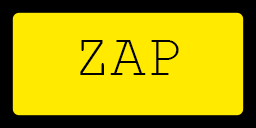
<style>
.page{position:relative;width:256px;height:128px;background:#ffea00}
.page>*{position:absolute;margin:0}
.t1{font:60px "CourierNewPSMT";color:#000000}
</style>
<div class="page">
<p class="t1" style="left:80px;top:40px;width:99px;height:35px">ZAP</p>
</div>
